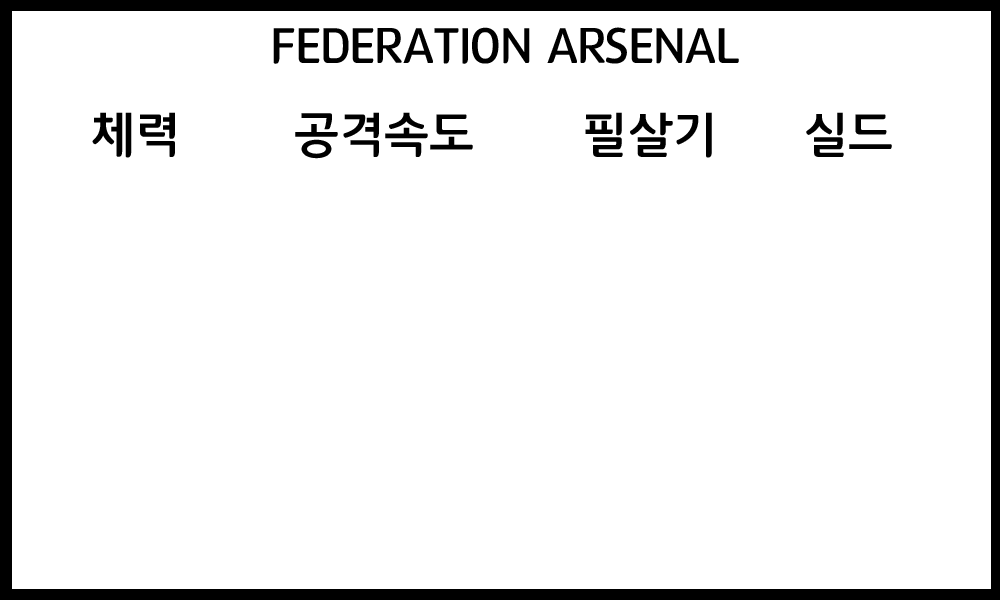
<style>
.page{position:relative;width:1000px;height:600px;background:#ffffff}
.page>*{position:absolute;margin:0}
.t1{font:50px "12LotteMartDreamBold";color:#000000}
</style>
<div class="page">
<p class="t1" style="left:273px;top:27px;width:466px;height:37px">FEDERATION ARSENAL</p>
<p class="t1" style="left:92px;top:112px;width:83px;height:46px">체력</p>
<p class="t1" style="left:295px;top:112px;width:178px;height:47px">공격속도</p>
<p class="t1" style="left:585px;top:112px;width:127px;height:46px">필살기</p>
<p class="t1" style="left:806px;top:112px;width:86px;height:45px">실드</p>
</div>
